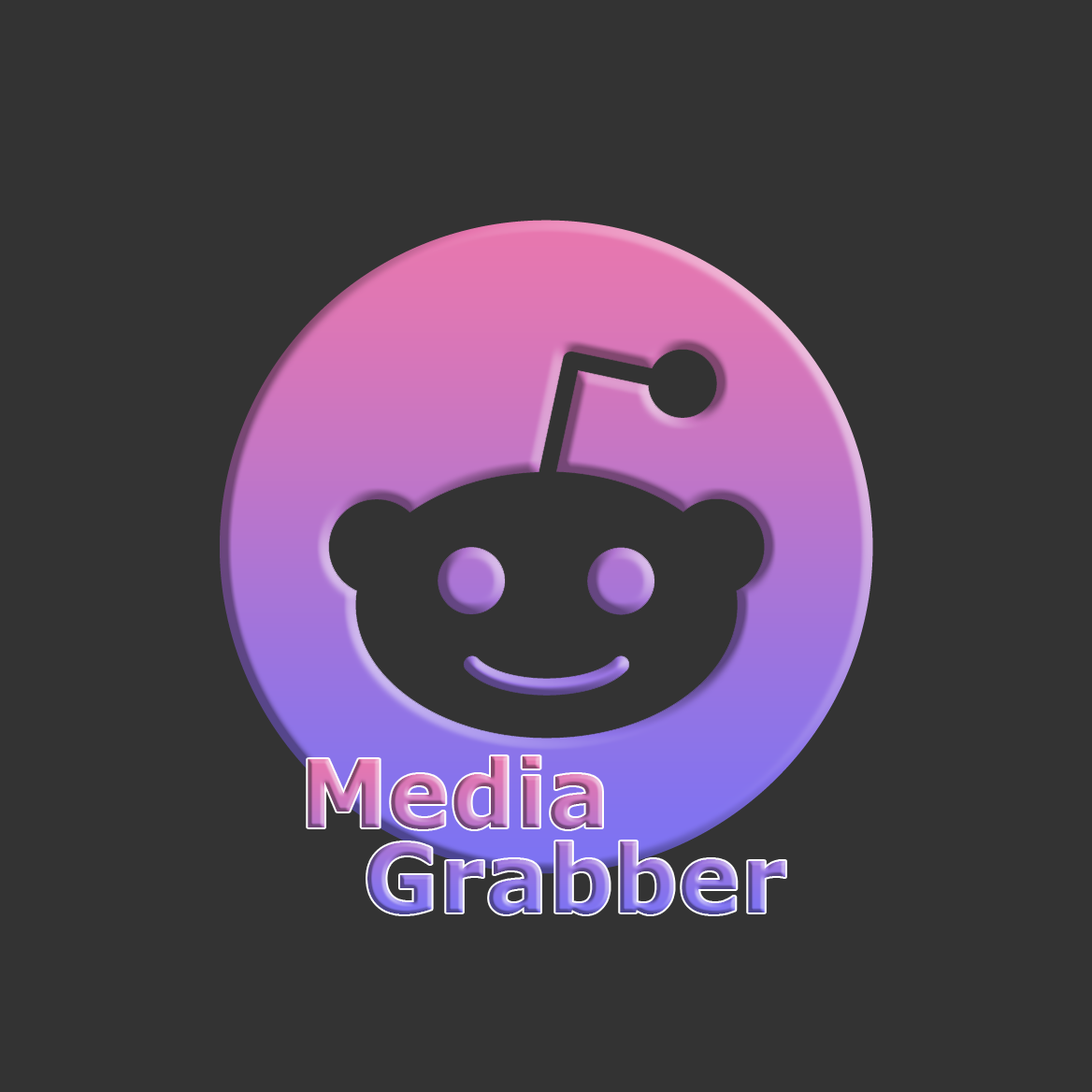
<style>
.page{position:relative;width:1092px;height:1092px;background:#333333}
.page>*{position:absolute;margin:0}
.t1{font:93.5px/85.7px "Verdana-Bold"}
</style>
<div class="page">
<p class="t1" style="left:308px;top:756px;width:477px;height:158px">Media<br>  Grabber</p>
</div>
